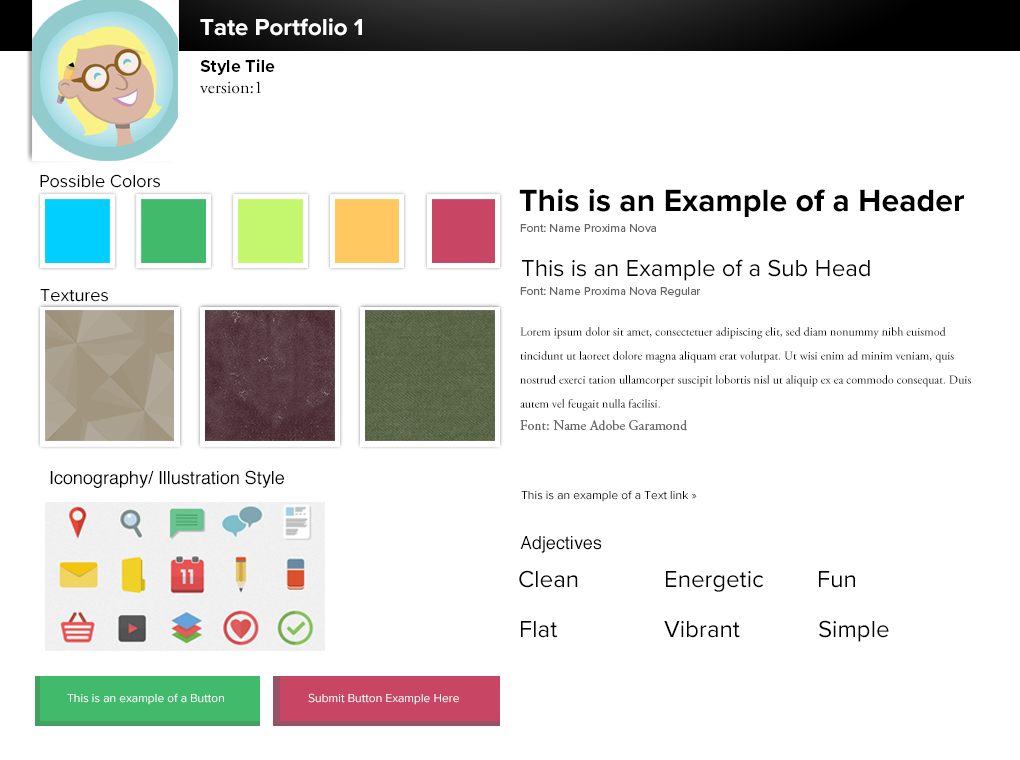
<style>
.page{position:relative;width:1020px;height:760px;background:#ffffff}
.page>*{position:absolute;margin:0}
.t1{font:24px "ProximaNova-Bold";color:#ffffff}
.t2{font:18px "ProximaNova-Bold";color:#000000}
.t3{font:18px "AGaramondPro-Regular";color:#000000}
.t4{font:18px "ProximaNova-Regular";color:#000000}
.t5{font:32px "ProximaNova-Bold";color:#000000}
.t6{font:12px "ProximaNova-Regular";color:#666666}
.t7{font:24px "ProximaNova-Regular";color:#000000}
.t8{font:12px/24px "AGaramondPro-Regular";color:#000000}
.t9{font:14px "AGaramondPro-Regular";color:#666666}
.t10{font:18px "Helvetica";color:#000000}
.t11{font:12px "ProximaNova-Regular";color:#000000}
.t12{font:12px "ProximaNova-Regular";color:#ffffff}
</style>
<div class="page">
<p class="t1" style="left:200px;top:18px;width:162px;height:18px">Tate Portfolio 1</p>
<p class="t2" style="left:200px;top:59px;width:75px;height:16px">Style Tile</p>
<p class="t3" style="left:200px;top:81px;width:61px;height:13px">version:1</p>
<p class="t4" style="left:40px;top:174px;width:120px;height:14px">Possible Colors</p>
<p class="t5" style="left:519px;top:188px;width:445px;height:29px">This is an Example of a Header</p>
<p class="t6" style="left:520px;top:224px;width:136px;height:8px">Font: Name Proxima Nova</p>
<p class="t7" style="left:522px;top:259px;width:348px;height:22px">This is an Example of a Sub Head</p>
<p class="t4" style="left:40px;top:289px;width:68px;height:13px">Textures</p>
<p class="t6" style="left:520px;top:287px;width:180px;height:10px">Font: Name Proxima Nova Regular</p>
<p class="t8" style="left:520px;top:327px;width:451px;height:84px">Lorem ipsum dolor sit amet, consectetuer adipiscing elit, sed diam nonummy nibh euismod tincidunt ut laoreet dolore magna aliquam erat volutpat. Ut wisi enim ad minim veniam, quis nostrud exerci tation ullamcorper suscipit lobortis nisl ut aliquip ex ea commodo consequat. Duis autem vel feugait nulla facilisi.</p>
<p class="t9" style="left:520px;top:420px;width:167px;height:11px">Font: Name Adobe Garamond</p>
<p class="t10" style="left:50px;top:470px;width:234px;height:18px">Iconography/ Illustration Style</p>
<p class="t11" style="left:521px;top:490px;width:176px;height:12px">This is an example of a Text link »</p>
<p class="t10" style="left:520px;top:536px;width:82px;height:17px">Adjectives</p>
<p class="t7" style="left:519px;top:570px;width:59px;height:18px">Clean</p>
<p class="t7" style="left:666px;top:571px;width:98px;height:21px">Energetic</p>
<p class="t7" style="left:819px;top:571px;width:36px;height:17px">Fun</p>
<p class="t7" style="left:521px;top:621px;width:37px;height:17px">Flat</p>
<p class="t7" style="left:664px;top:621px;width:76px;height:17px">Vibrant</p>
<p class="t7" style="left:819px;top:620px;width:70px;height:22px">Simple</p>
<p class="t12" style="left:67px;top:693px;width:157px;height:12px">This is an example of a Button</p>
<p class="t12" style="left:308px;top:693px;width:151px;height:12px">Submit Button Example Here</p>
</div>
